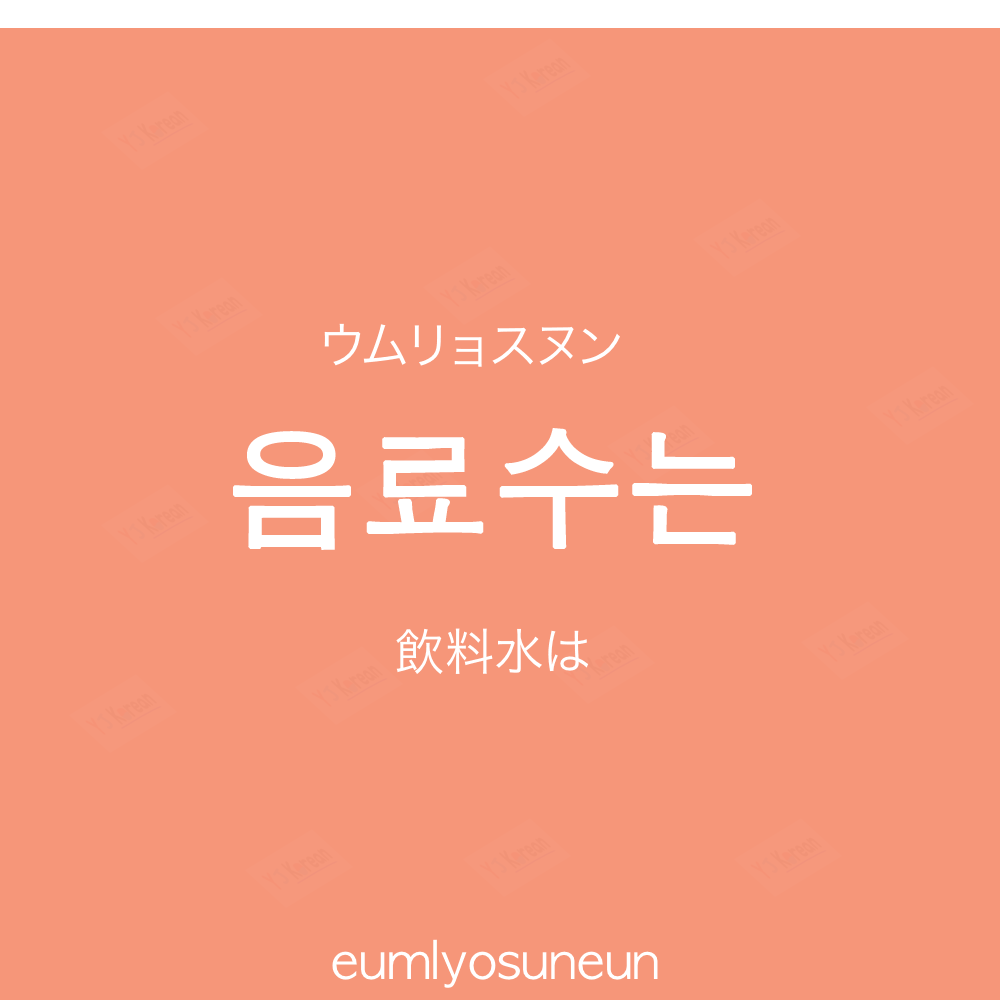
<style>
.page{position:relative;width:1000px;height:1000px;background:#f69679}
.page>*{position:absolute;margin:0}
.t1{font:50px "HiraKakuProN-W3";color:#ffffff;text-transform:uppercase}
.t2{font:130px "AppleGothic";color:#ffffff;font-weight:bold}
.t3{font:50px "HiraKakuProN-W3";color:#ffffff}
.t4{font:50px "AppleGothic";color:#ffffff}
</style>
<div class="page">
<p class="t1" style="left:324px;top:323px;width:296px;height:44px">ウムリョスヌン</p>
<p class="t2" style="left:233px;top:428px;width:519px;height:122px">음료수는</p>
<p class="t3" style="left:396px;top:628px;width:193px;height:46px">飲料水は</p>
<p class="t4" style="left:332px;top:939px;width:326px;height:49px">eumlyosuneun</p>
</div>
